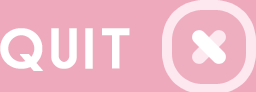
<style>
.page{position:relative;width:256px;height:92px;background:#eea9bd}
.page>*{position:absolute;margin:0}
.t1{font:55px "MarketDeco";letter-spacing:0.04em;color:#ffffff;font-weight:bold}
</style>
<div class="page">
<p class="t1" style="left:0px;top:28px;width:130px;height:43px">quit</p>
</div>
